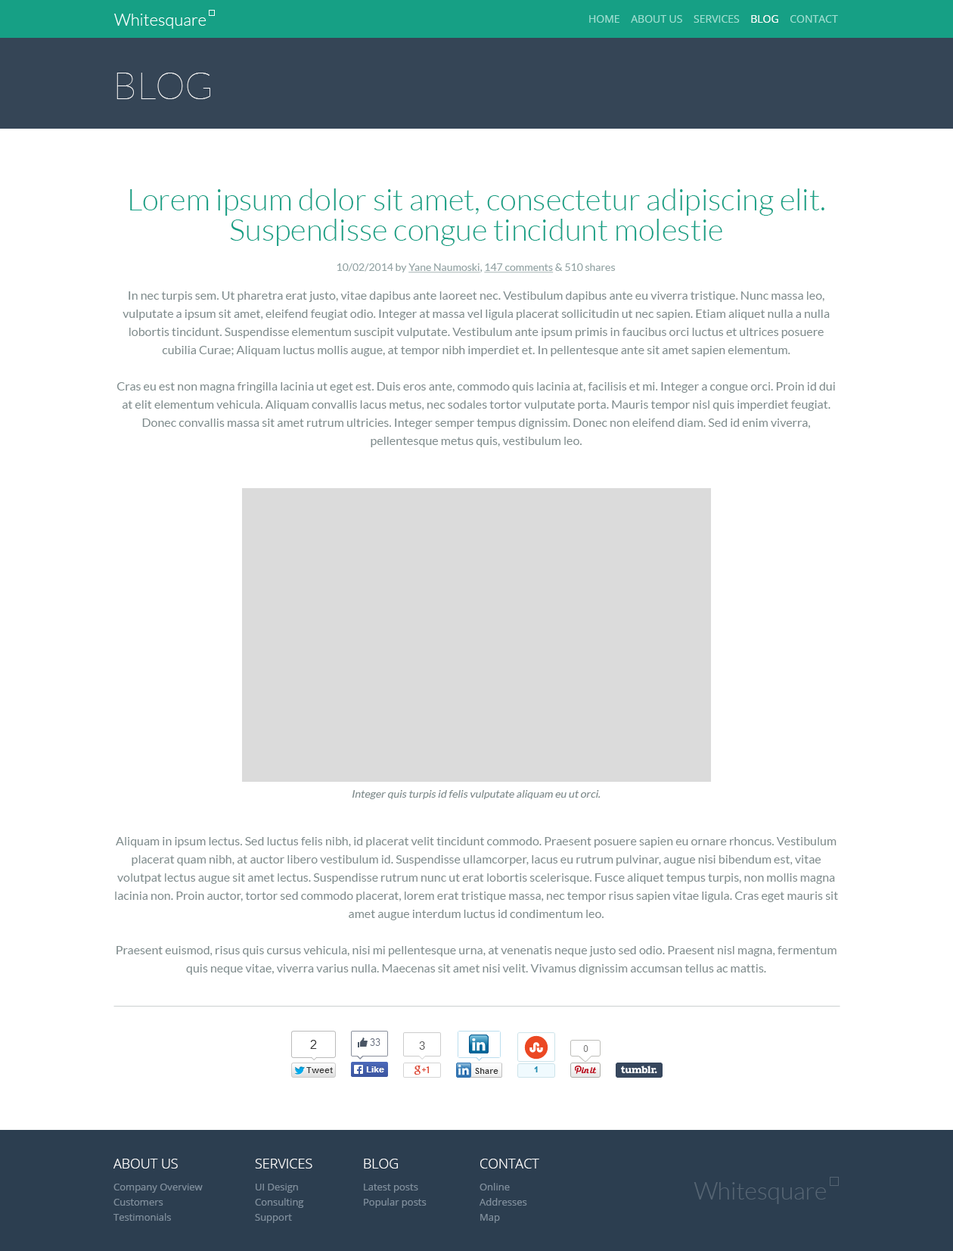
<style>
.page{position:relative;width:953px;height:1251px;background:#ffffff}
.page>*{position:absolute;margin:0}
.t1{font:10.6px "OpenSans";color:#9bded1;text-transform:uppercase}
.t2{font:10.6px "OpenSans";color:#ffffff;text-transform:uppercase}
.t3{font:37.8px "Lato-Hairline";color:#ffffff;text-transform:uppercase}
.t4{font:30.3px/30.3px "Lato-Light";color:#16a085}
.t5{font:10.6px "Lato-Regular";color:#95a5a6}
.t6{font:10.6px "Lato-Regular";color:#95a5a6;text-decoration:underline}
.t7{font:12.1px/18.2px "Lato-Regular";color:#7f8c8d}
.t8{font:10.6px "Lato-Regular";color:#7f8c8d;font-style:italic}
.t9{font:13.6px "OpenSans-Light";color:#ffffff;text-transform:uppercase}
.t10{font:9.8px/15.1px "OpenSans";color:#7f8e9c}
</style>
<div class="page">
<p class="t1" style="left:589px;top:15px;width:249px;height:8px">home    about us    services    <span class="t2">blog</span>    contact</p>
<p class="t3" style="left:117px;top:73px;width:93px;height:26px">Blog</p>
<p class="t4" style="left:130px;top:188px;width:695px;height:58px;text-align:center">Lorem ipsum dolor sit amet, consectetur adipiscing elit. Suspendisse congue tincidunt molestie</p>
<p class="t5" style="left:337px;top:263px;width:279px;height:10px">10/02/2014 by <span class="t6">Yane Naumoski</span>, <span class="t6">147 comments</span> &amp; 510 shares</p>
<p class="t7" style="left:117px;top:291px;width:718px;height:156px;text-align:center">In nec turpis sem. Ut pharetra erat justo, vitae dapibus ante laoreet nec. Vestibulum dapibus ante eu viverra tristique. Nunc massa leo, vulputate a ipsum sit amet, eleifend feugiat odio. Integer at massa vel ligula placerat sollicitudin ut nec sapien. Etiam aliquet nulla a nulla lobortis tincidunt. Suspendisse elementum suscipit vulputate. Vestibulum ante ipsum primis in faucibus orci luctus et ultrices posuere cubilia Curae; Aliquam luctus mollis augue, at tempor nibh imperdiet et. In pellentesque ante sit amet sapien elementum.<br><br>Cras eu est non magna fringilla lacinia ut eget est. Duis eros ante, commodo quis lacinia at, facilisis et mi. Integer a congue orci. Proin id dui at elit elementum vehicula. Aliquam convallis lacus metus, nec sodales tortor vulputate porta. Mauris tempor nisl quis imperdiet feugiat. Donec convallis massa sit amet rutrum ultricies. Integer semper tempus dignissim. Donec non eleifend diam. Sed id enim viverra, pellentesque metus quis, vestibulum leo.</p>
<p class="t8" style="left:352px;top:790px;width:249px;height:9px">Integer quis turpis id felis vulputate aliquam eu ut orci.</p>
<p class="t7" style="left:115px;top:837px;width:723px;height:138px;text-align:center">Aliquam in ipsum lectus. Sed luctus felis nibh, id placerat velit tincidunt commodo. Praesent posuere sapien eu ornare rhoncus. Vestibulum placerat quam nibh, at auctor libero vestibulum id. Suspendisse ullamcorper, lacus eu rutrum pulvinar, augue nisi bibendum est, vitae volutpat lectus augue sit amet lectus. Suspendisse rutrum nunc ut erat lobortis scelerisque. Fusce aliquet tempus turpis, non mollis magna lacinia non. Proin auctor, tortor sed commodo placerat, lorem erat tristique massa, nec tempor risus sapien vitae ligula. Cras eget mauris sit amet augue interdum luctus id condimentum leo.<br><br>Praesent euismod, risus quis cursus vehicula, nisi mi pellentesque urna, at venenatis neque justo sed odio. Praesent nisl magna, fermentum quis neque vitae, viverra varius nulla. Maecenas sit amet nisi velit. Vivamus dignissim accumsan tellus ac mattis.</p>
<p class="t9" style="left:113px;top:1158px;width:65px;height:10px">about us</p>
<p class="t9" style="left:255px;top:1158px;width:57px;height:10px">Services</p>
<p class="t9" style="left:364px;top:1158px;width:34px;height:10px">Blog</p>
<p class="t9" style="left:480px;top:1158px;width:59px;height:10px">Contact</p>
<p class="t10" style="left:113px;top:1183px;width:90px;height:37px">Company Overview<br>Customers<br>Testimonials</p>
<p class="t10" style="left:255px;top:1183px;width:49px;height:40px">UI Design<br>Consulting<br>Support</p>
<p class="t10" style="left:364px;top:1183px;width:63px;height:25px">Latest posts<br>Popular posts</p>
<p class="t10" style="left:480px;top:1183px;width:47px;height:40px">Online<br>Addresses<br>Map</p>
</div>
